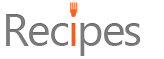
<style>
.page{position:relative;width:164px;height:59px;background:#ffffff}
.page>*{position:absolute;margin:0}
.t1{font:45px "SegoeUI";letter-spacing:-0.04em;color:#7c7c7c}
.t2{font:45px "SegoeUI";letter-spacing:-0.04em;color:#f56222}
</style>
<div class="page">
<p class="t1" style="left:6px;top:12px;width:135px;height:44px">Rec<span class="t2">i</span>pes</p>
</div>
